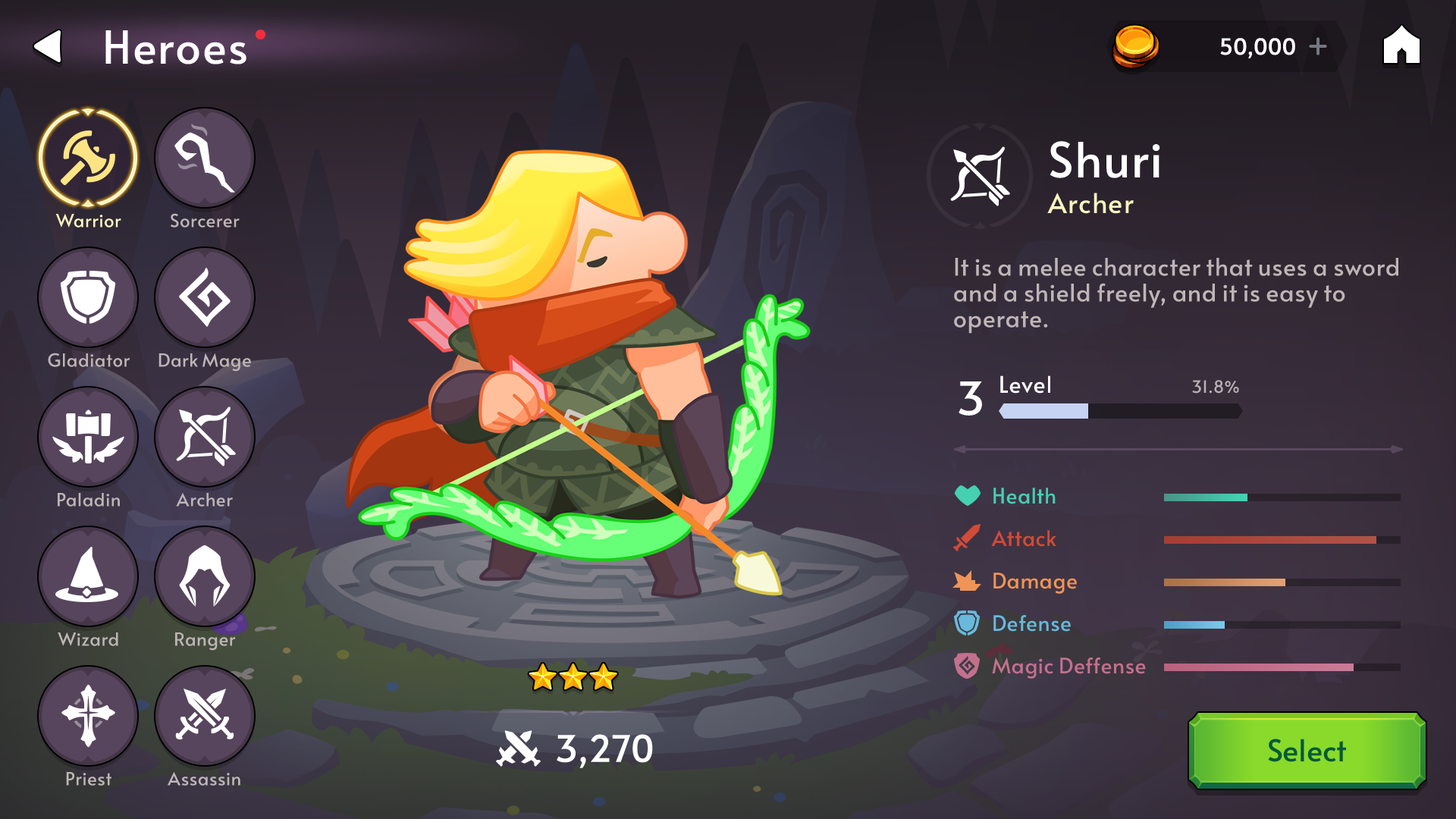
<style>
.page{position:relative;width:1456px;height:819px}
.page>*{position:absolute;margin:0}
.t1{font:45.5px "Alata-Regular";color:#ffffff}
.t2{font:21.9px "Alata-Regular";letter-spacing:-0.025em;color:#ffffff;font-weight:bold}
.t3{font:48.5px "Alata-Regular";color:#ffffff}
.t4{font:27.3px "Alata-Regular";color:#fbf4be}
.t5{font:24.3px/25.8px "Alata-Regular";letter-spacing:-0.01em;color:#beb5b6}
.t6{font:22.7px "Alata-Regular";color:#ffffff}
.t7{font:16.7px "Alata-Regular";color:#b7b1b5}
.t8{font:21.2px/42.5px "Alata-Regular";letter-spacing:-0.01em;color:#c3708c}
.t9{font:21.2px/42.5px "Alata-Regular";letter-spacing:-0.01em;color:#45d0b2}
.t10{font:21.2px/42.5px "Alata-Regular";letter-spacing:-0.01em;color:#d14b39}
.t11{font:21.2px/42.5px "Alata-Regular";letter-spacing:-0.01em;color:#ef9458}
.t12{font:21.2px/42.5px "Alata-Regular";letter-spacing:-0.01em;color:#68b9db}
.t13{font:36.4px "Alata-Regular";letter-spacing:-0.01em;color:#ffffff}
.t14{font:30.3px "Alata-Regular";color:#045a39}
</style>
<div class="page">
<p class="t1" style="left:105px;top:30px;width:141px;height:34px">Heroes</p>
<p class="t2" style="left:1220px;top:38px;width:75px;height:20px">50,000</p>
<p class="t3" style="left:1050px;top:141px;width:110px;height:37px">Shuri</p>
<p class="t4" style="left:1047px;top:193px;width:87px;height:21px">Archer</p>
<p class="t5" style="left:954px;top:258px;width:444px;height:76px">It is a melee character that uses a sword <br>and a shield freely, and it is easy to <br>operate.</p>
<p class="t6" style="left:1000px;top:375px;width:50px;height:19px">Level</p>
<p class="t1" style="left:959px;top:381px;width:23px;height:35px">3</p>
<p class="t7" style="left:1192px;top:380px;width:47px;height:14px">31.8%</p>
<p class="t8" style="left:991px;top:488px;width:155px;height:191px"><span class="t9">Health<br></span><span class="t10">Attack<br></span><span class="t11">Damage<br></span><span class="t12">Defense<br></span>Magic Deffense</p>
<p class="t13" style="left:557px;top:734px;width:96px;height:34px">3,270</p>
<p class="t14" style="left:1268px;top:739px;width:78px;height:23px">Select</p>
</div>
